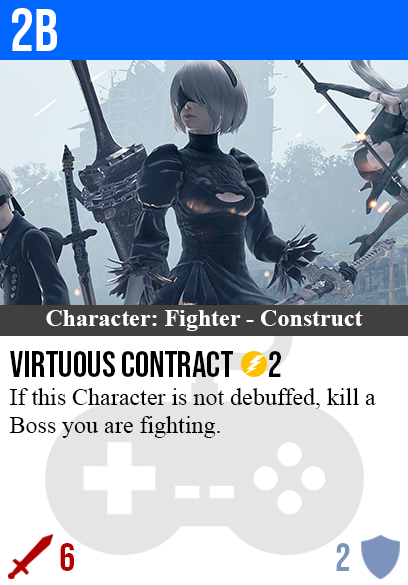
<style>
.page{position:relative;width:408px;height:585px;background:#ffffff}
.page>*{position:absolute;margin:0}
.t1{font:60px "BebasNeue-Regular";color:#ffffff}
.t2{font:24px "TimesNewRomanPS-BoldMT";color:#ffffff}
.t3{font:36px "BebasNeue-Regular";color:#000000}
.t4{font:24px "TimesNewRomanPSMT";color:#000000}
.t5{font:40px "BebasNeue-Regular";color:#af0202}
.t6{font:40px "BebasNeue-Regular";color:#7c94bd}
</style>
<div class="page">
<p class="t1" style="left:12px;top:8px;width:45px;height:43px">2b</p>
<p class="t2" style="left:46px;top:310px;width:317px;height:21px">Character: Fighter - Construct</p>
<p class="t3" style="left:10px;top:351px;width:271px;height:26px">virtuous contract      2</p>
<p class="t4" style="left:9px;top:388px;width:367px;height:50px">If this Character is not debuffed, kill a<br>Boss you are fighting.</p>
<p class="t5" style="left:60px;top:543px;width:14px;height:28px">6</p>
<p class="t6" style="left:336px;top:543px;width:14px;height:28px">2</p>
</div>
